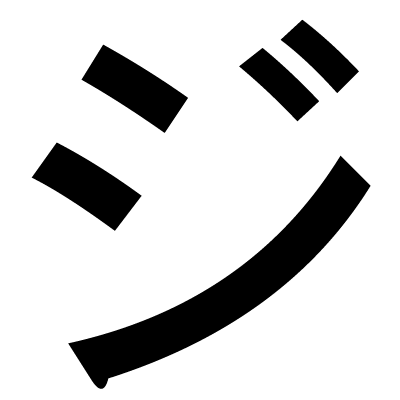
<style>
.page{position:relative;width:400px;height:400px;background:#ffffff}
.page>*{position:absolute;margin:0}
.t1{font:424.8px "MS-PGothic";color:#000000}
</style>
<div class="page">
<p class="t1" style="left:31px;top:19px;width:340px;height:370px">ジ</p>
</div>
